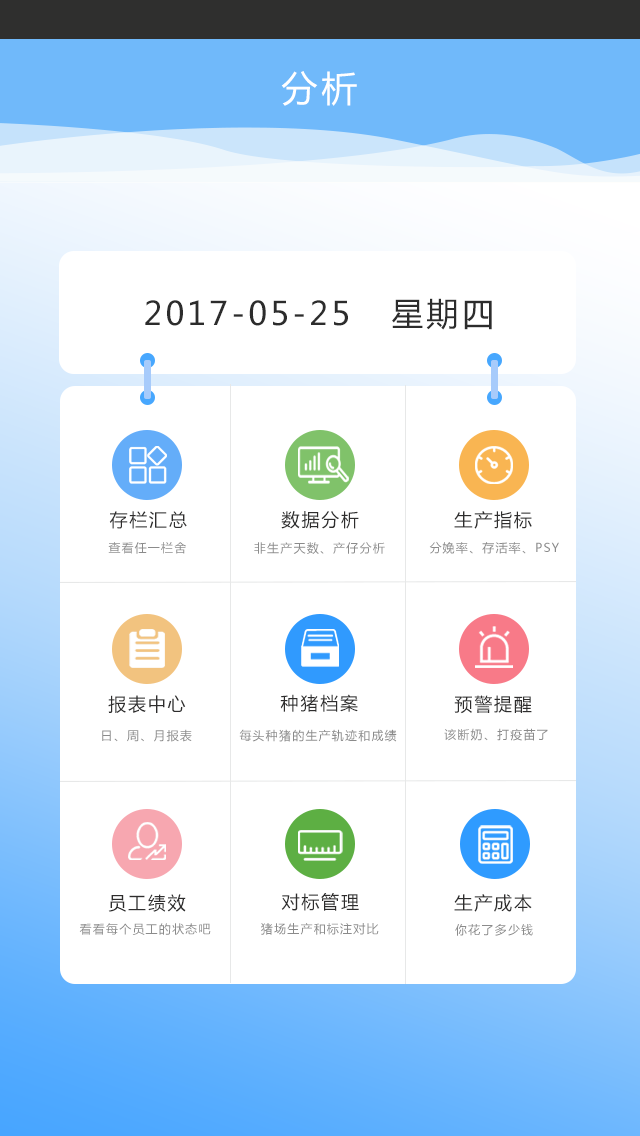
<style>
.page{position:relative;width:640px;height:1136px;background:#ffffff}
.page>*{position:absolute;margin:0}
.t1{font:36px "MicrosoftYaHei";letter-spacing:0.1em;color:#ffffff}
.t2{font:32px "MicrosoftYaHei";letter-spacing:0.1em;color:#2c2c2c}
.t3{font:18px "MicrosoftYaHei";letter-spacing:0.1em;color:#2e2d2d}
.t4{font:12px "MicrosoftYaHei";letter-spacing:0.1em;color:#8b8b8b}
</style>
<div class="page">
<p class="t1" style="left:281px;top:71px;width:76px;height:35px">分析</p>
<p class="t2" style="left:145px;top:298px;width:347px;height:32px">2017-05-25   星期四</p>
<p class="t3" style="left:109px;top:511px;width:78px;height:18px">存栏汇总</p>
<p class="t3" style="left:281px;top:511px;width:78px;height:18px">数据分析</p>
<p class="t3" style="left:454px;top:511px;width:78px;height:18px">生产指标</p>
<p class="t4" style="left:108px;top:542px;width:78px;height:12px">查看任一栏舍</p>
<p class="t4" style="left:254px;top:542px;width:131px;height:12px">非生产天数、产仔分析</p>
<p class="t4" style="left:429px;top:541px;width:130px;height:13px">分娩率、存活率、PSY</p>
<p class="t3" style="left:108px;top:695px;width:78px;height:18px">报表中心</p>
<p class="t3" style="left:280px;top:694px;width:78px;height:18px">种猪档案</p>
<p class="t3" style="left:454px;top:695px;width:78px;height:19px">预警提醒</p>
<p class="t4" style="left:102px;top:729px;width:90px;height:13px">日、周、月报表</p>
<p class="t4" style="left:239px;top:729px;width:158px;height:13px">每头种猪的生产轨迹和成绩</p>
<p class="t4" style="left:444px;top:728px;width:104px;height:13px">该断奶、打疫苗了</p>
<p class="t3" style="left:108px;top:894px;width:78px;height:18px">员工绩效</p>
<p class="t3" style="left:281px;top:893px;width:78px;height:18px">对标管理</p>
<p class="t3" style="left:454px;top:894px;width:78px;height:18px">生产成本</p>
<p class="t4" style="left:79px;top:923px;width:132px;height:12px">看看每个员工的状态吧</p>
<p class="t4" style="left:261px;top:923px;width:118px;height:12px">猪场生产和标注对比</p>
<p class="t4" style="left:455px;top:924px;width:78px;height:12px">你花了多少钱</p>
</div>
